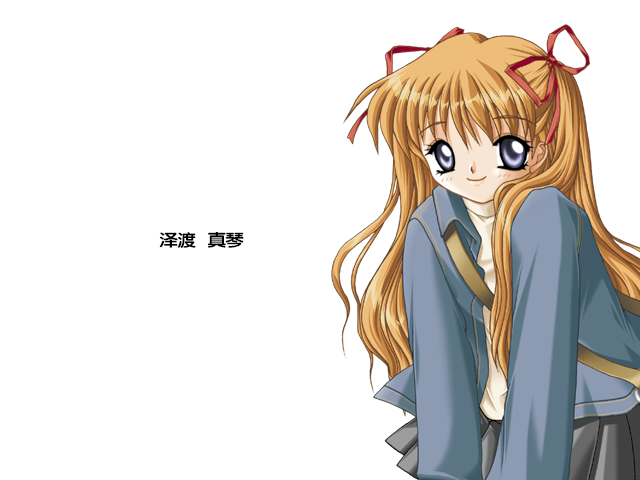
<style>
.page{position:relative;width:640px;height:480px;background:#ffffff}
.page>*{position:absolute;margin:0}
.t1{font:17px "FZY4K--GBK1-0";letter-spacing:-0.08em;color:#000000;scale:1.14 1}
</style>
<div class="page">
<p class="t1" style="left:159px;top:232px;width:85px;height:16px">泽渡   真琴</p>
</div>
